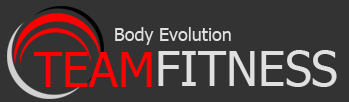
<style>
.page{position:relative;width:349px;height:102px;background:#333333}
.page>*{position:absolute;margin:0}
.t1{font:18px "Tahoma";color:#e0e0e0}
.t2{font:48px "Tahoma";color:#ff0000;text-transform:uppercase}
.t3{font:48px "Tahoma";color:#e0e0e0;text-transform:uppercase}
</style>
<div class="page">
<p class="t1" style="left:115px;top:27px;width:116px;height:18px">Body Evolution</p>
<p class="t2" style="left:34px;top:52px;width:118px;height:35px">Team</p>
<p class="t3" style="left:158px;top:50px;width:179px;height:37px">Fitness</p>
</div>
